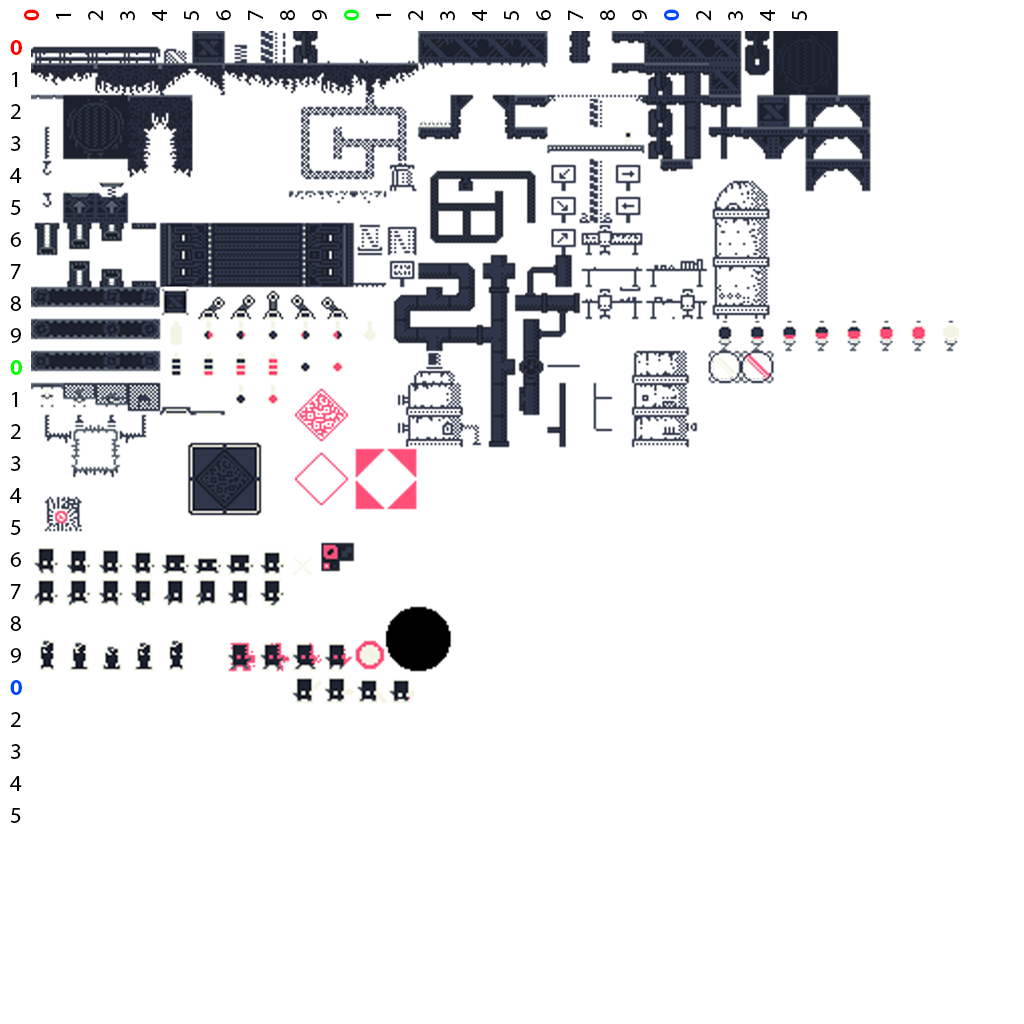
<style>
.page{position:relative;width:1024px;height:1024px;background:#ffffff}
.page>*{position:absolute;margin:0}
.t1{font:32px "MyriadArabic-Regular";color:#000000}
.t2{font:32px "MyriadArabic-Bold";color:#ff0000}
.t3{font:32px "MyriadArabic-Bold";color:#00ff0c}
.t4{font:32px "MyriadArabic-Bold";color:#0048ff}
.t5{font:32px "MyriadArabic-Bold";color:#00ff00}
</style>
<div class="page">
<p class="t1" style="left:24px;top:9px;width:783px;height:12px;rotate:-90deg"><span class="t2">0</span>123456789<span class="t3">0</span>123456789<span class="t4">0</span>2345</p>
<p class="t1" style="left:10px;top:40px;width:12px;height:783px"><span class="t2">0</span>123456789<span class="t5">0</span>123456789<span class="t4">0</span>2345</p>
</div>
